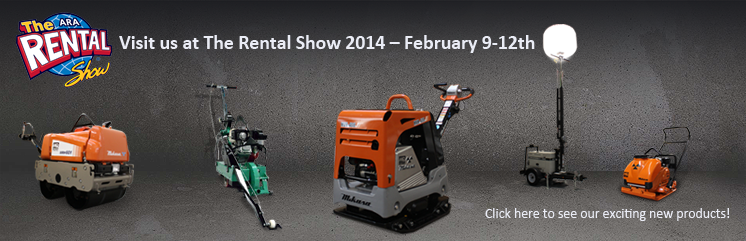
<style>
.page{position:relative;width:746px;height:241px}
.page>*{position:absolute;margin:0}
.t1{font:19.7px "Calibri-Bold";color:#eaecf5}
.t2{font:13.8px "Calibri";color:#eaecf5}
</style>
<div class="page">
<p class="t1" style="left:119px;top:35px;width:416px;height:18px">Visit us at The Rental Show 2014 – February 9-12th</p>
<p class="t2" style="left:485px;top:208px;width:245px;height:13px">Click here to see our exciting new products!</p>
</div>
